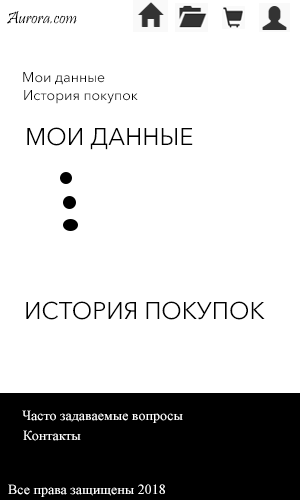
<style>
.page{position:relative;width:300px;height:500px;background:#ffffff}
.page>*{position:absolute;margin:0}
.t1{font:18px "Pristina-Regular";color:#000000}
.t2{font:14px "AvenirNextCyr-Regular";color:#000000}
.t3{font:24px "AvenirNextCyr-Regular";color:#000000}
.t4{font:14px "TimesNewRomanPSMT";color:#ffffff}
</style>
<div class="page">
<p class="t1" style="left:7px;top:11px;width:70px;height:13px">Aurora.com</p>
<p class="t2" style="left:23px;top:72px;width:82px;height:13px">Мои данные</p>
<p class="t2" style="left:24px;top:90px;width:114px;height:14px">История покупок</p>
<p class="t3" style="left:27px;top:127px;width:166px;height:23px">МОИ ДАННЫЕ</p>
<p class="t3" style="left:26px;top:301px;width:239px;height:19px">ИСТОРИЯ ПОКУПОК</p>
<p class="t4" style="left:22px;top:410px;width:161px;height:13px">Часто задаваемые вопросы</p>
<p class="t4" style="left:23px;top:430px;width:58px;height:11px">Контакты</p>
<p class="t4" style="left:8px;top:484px;width:157px;height:13px">Все права защищены 2018</p>
</div>
